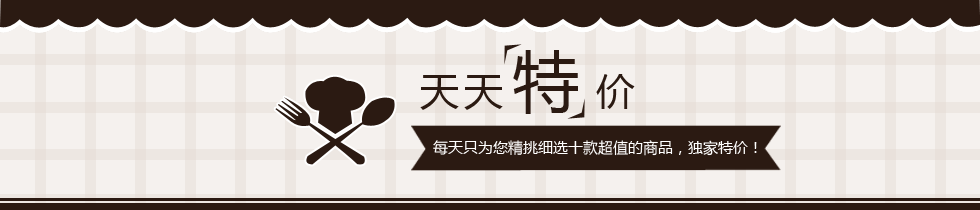
<style>
.page{position:relative;width:980px;height:210px;background:#f5f1ee}
.page>*{position:absolute;margin:0}
.t1{font:39.4px "MicrosoftYaHei";color:#2b1a12}
.t2{font:65.6px "MicrosoftYaHei";color:#2b1a12}
.t3{font:15px "MicrosoftYaHei";color:#ffffff}
</style>
<div class="page">
<p class="t1" style="left:420px;top:50px;width:215px;height:64px">天天 <span class="t2">特</span>价</p>
<p class="t3" style="left:433px;top:140px;width:324px;height:16px">每天只为您精挑细选十款超值的商品，独家特价！</p>
</div>
